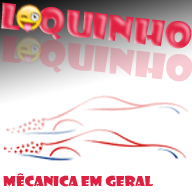
<style>
.page{position:relative;width:192px;height:192px;background:#ffffff}
.page>*{position:absolute;margin:0}
.t1{font:34.3px "ShowcardGothic-Reg";scale:1.17 1}
.t2{font:13.3px "ShowcardGothic-Reg";color:#e02041;scale:1.17 1}
</style>
<div class="page">
<p class="t1" style="left:1px;top:2px;width:191px;height:47px;rotate:6deg">L  quinho</p>
<p class="t2" style="left:3px;top:173px;width:150px;height:14px">Mêcanica em Geral</p>
</div>
